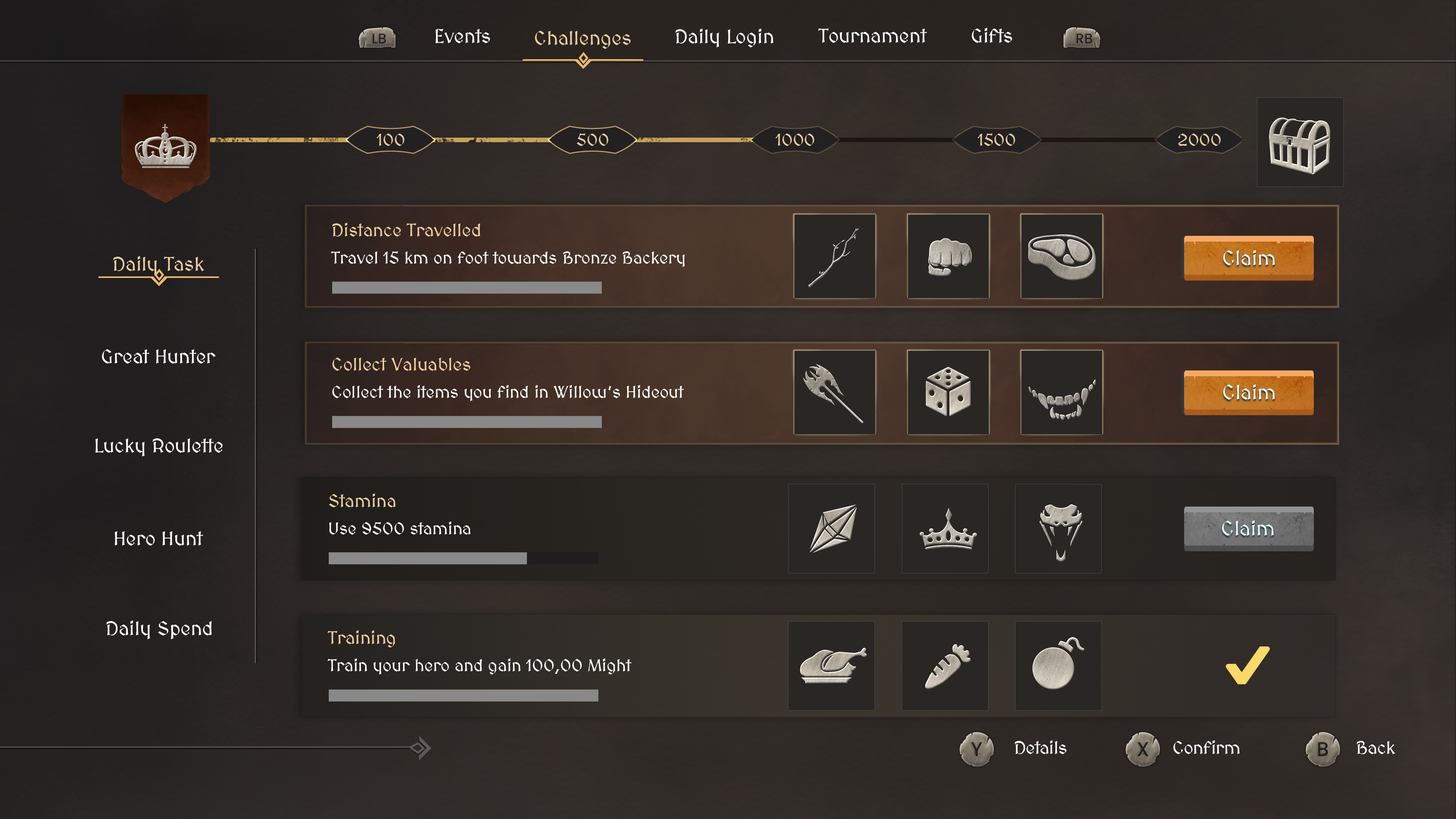
<style>
.page{position:relative;width:1456px;height:819px}
.page>*{position:absolute;margin:0}
.t1{font:19.8px "MedievalSharp";color:#ffffff}
.t2{font:19.8px "MedievalSharp";color:#ebcd9e}
.t3{font:17.1px "MedievalSharp";color:#ebcd9e}
.t4{font:18.2px "MedievalSharp";color:#ebcd9e}
.t5{font:17.1px "MedievalSharp";color:#ffffff}
.t6{font:20.5px "MedievalSharp";color:#e5fbfd}
.t7{font:18.2px "MedievalSharp";letter-spacing:-0.02em;color:#ffffff}
</style>
<div class="page">
<p class="t1" style="left:435px;top:29px;width:55px;height:14px">Events</p>
<p class="t1" style="left:675px;top:28px;width:98px;height:19px">Daily Login</p>
<p class="t1" style="left:818px;top:28px;width:109px;height:15px">Tournament</p>
<p class="t1" style="left:972px;top:28px;width:40px;height:15px">Gifts</p>
<p class="t2" style="left:535px;top:31px;width:96px;height:18px">Challenges</p>
<p class="t3" style="left:376px;top:133px;width:29px;height:13px">100</p>
<p class="t3" style="left:577px;top:133px;width:32px;height:13px">500</p>
<p class="t3" style="left:775px;top:133px;width:39px;height:13px">1000</p>
<p class="t3" style="left:977px;top:133px;width:38px;height:13px">1500</p>
<p class="t3" style="left:1178px;top:133px;width:43px;height:13px">2000</p>
<p class="t4" style="left:332px;top:223px;width:148px;height:14px">Distance Travelled</p>
<p class="t2" style="left:113px;top:256px;width:91px;height:19px">Daily Task</p>
<p class="t5" style="left:331px;top:251px;width:354px;height:16px">Travel 15 km on foot towards Bronze Backery</p>
<p class="t6" style="left:1223px;top:250px;width:52px;height:15px">Claim</p>
<p class="t1" style="left:102px;top:349px;width:114px;height:15px">Great Hunter</p>
<p class="t4" style="left:332px;top:358px;width:139px;height:13px">Collect Valuables</p>
<p class="t5" style="left:332px;top:385px;width:352px;height:16px">Collect the items you find in Willow’s Hideout</p>
<p class="t6" style="left:1223px;top:384px;width:52px;height:16px">Claim</p>
<p class="t1" style="left:95px;top:438px;width:128px;height:19px">Lucky Roulette</p>
<p class="t4" style="left:329px;top:493px;width:67px;height:14px">Stamina</p>
<p class="t5" style="left:329px;top:521px;width:142px;height:14px">Use 9500 stamina</p>
<p class="t6" style="left:1222px;top:520px;width:52px;height:16px">Claim</p>
<p class="t1" style="left:115px;top:531px;width:88px;height:15px">Hero Hunt</p>
<p class="t1" style="left:106px;top:620px;width:106px;height:19px">Daily Spend</p>
<p class="t4" style="left:327px;top:630px;width:68px;height:18px">Training</p>
<p class="t5" style="left:327px;top:658px;width:305px;height:17px">Train your hero and gain 100,00 Might</p>
<p class="t7" style="left:1015px;top:740px;width:52px;height:14px">Details</p>
<p class="t7" style="left:1173px;top:740px;width:67px;height:14px">Confirm</p>
<p class="t7" style="left:1357px;top:741px;width:38px;height:13px">Back</p>
</div>
